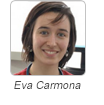
<style>
.page{position:relative;width:104px;height:105px;background:#ffffff}
.page>*{position:absolute;margin:0}
.t1{font:11px "ArialMT";color:#494949;font-style:italic}
</style>
<div class="page">
<p class="t1" style="left:14px;top:81px;width:67px;height:8px">Eva Carmona</p>
</div>
